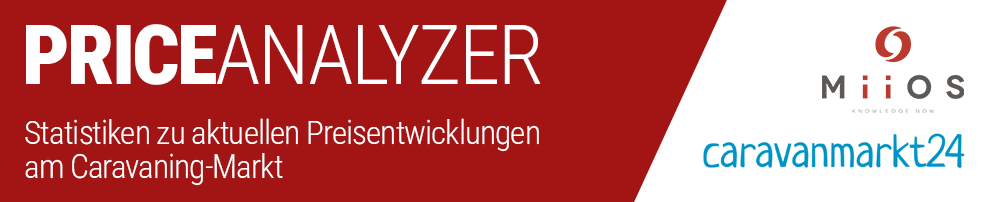
<style>
.page{position:relative;width:1000px;height:202px;background:#a31414}
.page>*{position:absolute;margin:0}
.t1{font:83px "RobotoCondensed-Light";letter-spacing:-0.03em;color:#ffffff}
.t2{font:83px "RobotoCondensed-Black";letter-spacing:-0.03em;color:#ffffff}
.t3{font:33.5px/33.5px "RobotoCondensed-Light";letter-spacing:-0.03em;color:#ffffff}
</style>
<div class="page">
<p class="t1" style="left:26px;top:24px;width:515px;height:61px"><span class="t2">PRICE</span>ANALYZER</p>
<p class="t3" style="left:25px;top:118px;width:514px;height:68px">Statistiken zu aktuellen Preisentwicklungen<br>am Caravaning-Markt</p>
</div>
